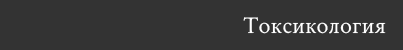
<style>
.page{position:relative;width:403px;height:50px;background:#333333}
.page>*{position:absolute;margin:0}
.t1{font:24px "CrimsonText-Regular";color:#ffffff}
</style>
<div class="page">
<p class="t1" style="left:243px;top:17px;width:143px;height:17px">Токсикология</p>
</div>
